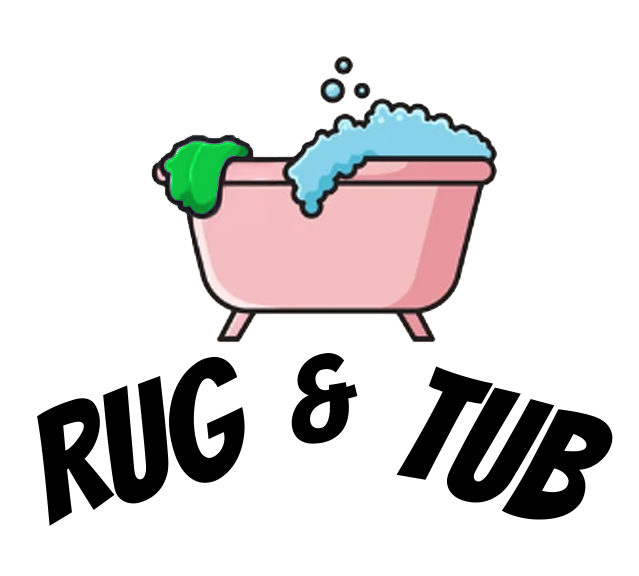
<style>
.page{position:relative;width:639px;height:576px;background:#ffffff}
.page>*{position:absolute;margin:0}
.t1{font:117px "Bangers-Regular";color:#000000}
.t2{font:155.5px "Bangers-Regular";color:#000000}
.t3{font:160.8px "Bangers-Regular";color:#000000}
</style>
<div class="page">
<p class="t1" style="left:291px;top:353px;width:67px;height:91px;rotate:-7deg">&amp;</p>
<p class="t2" style="left:37px;top:356px;width:208px;height:170px;rotate:-17deg">Rug</p>
<p class="t3" style="left:396px;top:366px;width:217px;height:154px;rotate:19deg">TUB</p>
</div>
